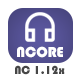
<style>
.page{position:relative;width:80px;height:80px;background:#ffffff}
.page>*{position:absolute;margin:0}
.t1{font:15px "Bauhaus93";color:#ffffff}
.t2{font:12px "Bauhaus93";color:#464646}
</style>
<div class="page">
<p class="t1" style="left:17px;top:46px;width:46px;height:12px">NCORE</p>
<p class="t2" style="left:15px;top:65px;width:50px;height:10px">NC 1.12x</p>
</div>
